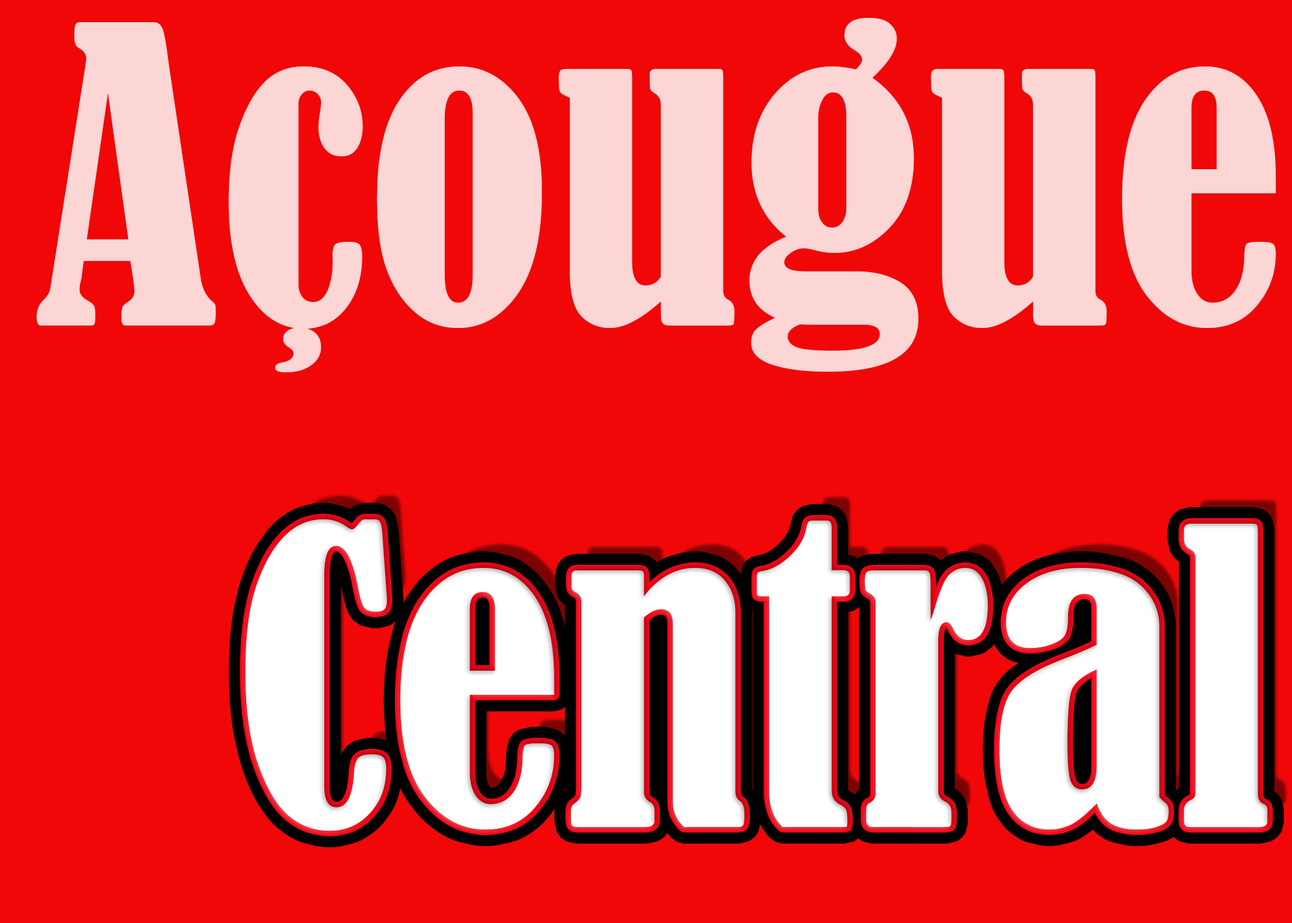
<style>
.page{position:relative;width:1292px;height:923px;background:#f10707}
.page>*{position:absolute;margin:0}
.t1{font:384.5px "BernardMT-Condensed";color:#fcd5d5}
.t2{font:384.5px "BernardMT-Condensed";color:#ffffff}
</style>
<div class="page">
<p class="t1" style="left:36px;top:18px;width:1240px;height:354px">Açougue</p>
<p class="t2" style="left:245px;top:519px;width:1022px;height:312px">Central</p>
</div>
